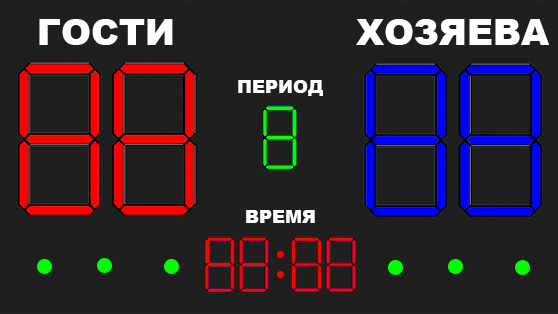
<style>
.page{position:relative;width:558px;height:314px;background:#1f1f1f}
.page>*{position:absolute;margin:0}
.t1{font:36px "Arial-Black";color:#ffffff}
.t2{font:36px "Arial-Black";color:#0000ff}
.t3{font:18px "Arial-Black";color:#ffffff}
</style>
<div class="page">
<p class="t1" style="left:39px;top:19px;width:134px;height:26px"><span class="t2"> </span>ГОСТИ</p>
<p class="t1" style="left:356px;top:19px;width:193px;height:26px">ХОЗЯЕВА</p>
<p class="t3" style="left:238px;top:80px;width:85px;height:16px">ПЕРИОД</p>
<p class="t3" style="left:246px;top:210px;width:69px;height:13px">ВРЕМЯ</p>
</div>
